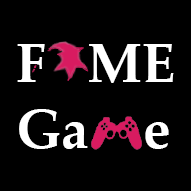
<style>
.page{position:relative;width:191px;height:191px;background:#000000}
.page>*{position:absolute;margin:0}
.t1{font:54.8px "PalatinoLinotype-Bold";color:#ffffff}
</style>
<div class="page">
<p class="t1" style="left:17px;top:44px;width:157px;height:105px">F   ME <br>Ga    e</p>
</div>
